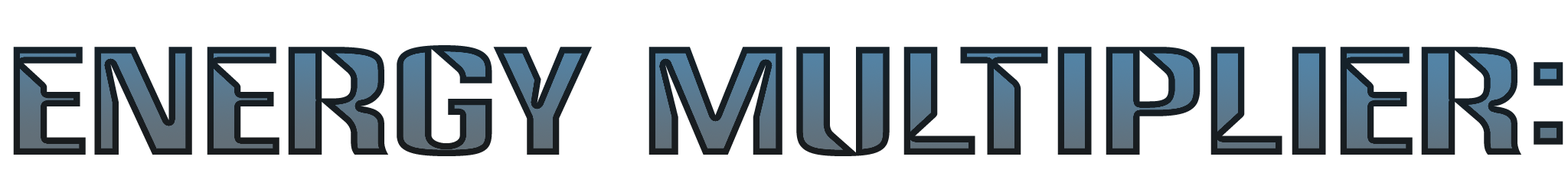
<style>
.page{position:relative;width:1568px;height:196px;background:#ffffff}
.page>*{position:absolute;margin:0}
.t1{font:147px "Anklepants-Regular"}
</style>
<div class="page">
<p class="t1" style="left:13px;top:45px;width:1550px;height:111px">Energy Multiplier:</p>
</div>
